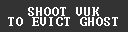
<style>
.page{position:relative;width:128px;height:32px;background:#333333}
.page>*{position:absolute;margin:0}
.t1{font:12px/10px "Terminal";color:#ffffff}
</style>
<div class="page">
<p class="t1" style="left:8px;top:7px;width:110px;height:19px;text-align:center">SHOOT VUK<br>TO EVICT GHOST</p>
</div>
